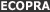
<style>
.page{position:relative;width:50px;height:12px;background:#333333}
.page>*{position:absolute;margin:0}
.t1{font:12px "Verdana-Bold";color:#fefbfb;scale:0.91 1}
</style>
<div class="page">
<p class="t1" style="left:1px;top:1px;width:49px;height:10px">ECOPRA</p>
</div>
